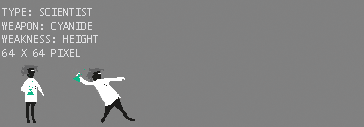
<style>
.page{position:relative;width:364px;height:127px;background:#808080}
.page>*{position:absolute;margin:0}
.t1{font:10px "Monaco";letter-spacing:0.005em;color:#e2e2e4;text-transform:uppercase}
</style>
<div class="page">
<p class="t1" style="left:2px;top:8px;width:90px;height:8px">TYPE: scientist</p>
<p class="t1" style="left:2px;top:22px;width:90px;height:8px">weapon: cyanide</p>
<p class="t1" style="left:2px;top:35px;width:96px;height:8px">WEAKNESS: height</p>
<p class="t1" style="left:2px;top:49px;width:78px;height:8px">64 x 64 pixel</p>
</div>
